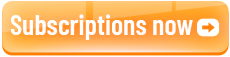
<style>
.page{position:relative;width:230px;height:57px}
.page>*{position:absolute;margin:0}
.t1{font:28px "BarlowCondensed-SemiBold";color:#fffefe}
</style>
<div class="page">
<p class="t1" style="left:10px;top:14px;width:183px;height:26px">Subscriptions now</p>
</div>
